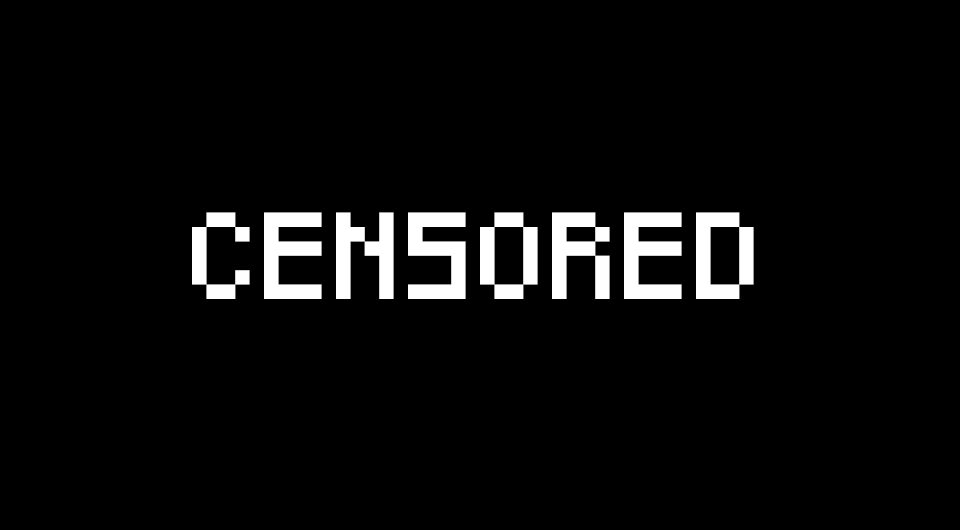
<style>
.page{position:relative;width:960px;height:530px;background:#000000}
.page>*{position:absolute;margin:0}
.t1{font:72px "Pixeled";color:#ffffff}
</style>
<div class="page">
<p class="t1" style="left:192px;top:212px;width:562px;height:87px">CENSORED</p>
</div>
